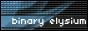
<style>
.page{position:relative;width:88px;height:31px}
.page>*{position:absolute;margin:0}
.t1{font:10px "04b03";color:#ffffff}
</style>
<div class="page">
<p class="t1" style="left:12px;top:17px;width:74px;height:10px">binary elysium</p>
</div>
